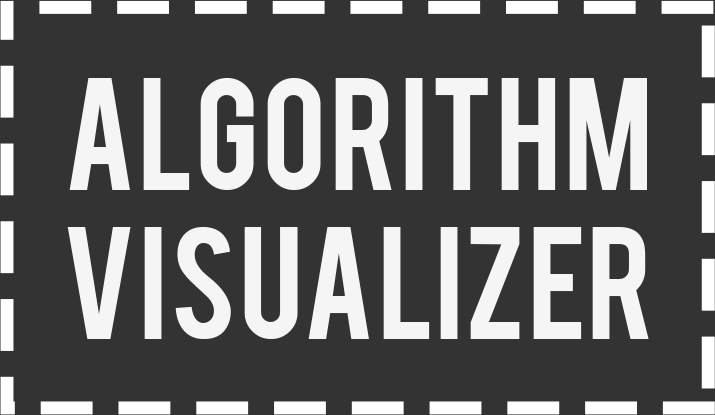
<style>
.page{position:relative;width:715px;height:415px;background:#333333}
.page>*{position:absolute;margin:0}
.t1{font:124.4px "Bebas";color:#f5f5f5}
</style>
<div class="page">
<p class="t1" style="left:67px;top:78px;width:582px;height:261px;text-align:center">ALGORITHM<br>VISUALIZER</p>
</div>
